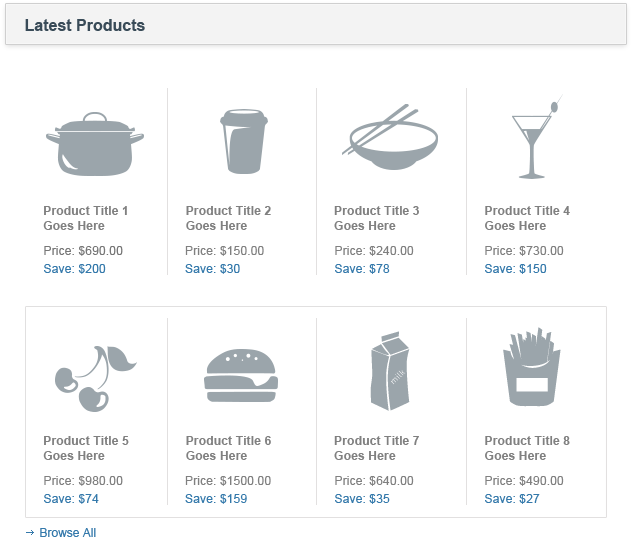
<style>
.page{position:relative;width:632px;height:537px;background:#ffffff}
.page>*{position:absolute;margin:0}
.t1{font:16px "Arial-BoldMT";color:#394b58}
.t2{font:12px "Arial-BoldMT";color:#808080}
.t3{font:12px/18px "ArialMT";color:#777777}
.t4{font:12px/18px "ArialMT";color:#3479ab}
.t5{font:12px/18px "ArialMT";color:#808080}
.t6{font:12px "ArialMT";color:#3479ab}
</style>
<div class="page">
<p class="t1" style="left:25px;top:19px;width:120px;height:12px">Latest Products</p>
<p class="t2" style="left:43px;top:206px;width:84px;height:24px">Product Title 1<br>Goes Here</p>
<p class="t2" style="left:186px;top:206px;width:85px;height:24px">Product Title 2<br>Goes Here</p>
<p class="t2" style="left:334px;top:206px;width:85px;height:24px">Product Title 3<br>Goes Here</p>
<p class="t2" style="left:485px;top:206px;width:85px;height:24px">Product Title 4<br>Goes Here</p>
<p class="t3" style="left:44px;top:246px;width:79px;height:28px">Price: $690.00<br><span class="t4">Save: $200</span></p>
<p class="t5" style="left:185px;top:246px;width:79px;height:28px">Price: $150.00<br><span class="t4">Save: $30</span></p>
<p class="t5" style="left:335px;top:246px;width:79px;height:28px">Price: $240.00<br><span class="t4">Save: $78</span></p>
<p class="t5" style="left:485px;top:246px;width:79px;height:28px">Price: $730.00<br><span class="t4">Save: $150</span></p>
<p class="t2" style="left:43px;top:436px;width:86px;height:24px">Product Title 5<br>Goes Here</p>
<p class="t2" style="left:186px;top:436px;width:85px;height:24px">Product Title 6<br>Goes Here</p>
<p class="t2" style="left:334px;top:436px;width:85px;height:24px">Product Title 7<br>Goes Here</p>
<p class="t2" style="left:485px;top:436px;width:85px;height:24px">Product Title 8<br>Goes Here</p>
<p class="t5" style="left:44px;top:476px;width:79px;height:28px">Price: $980.00<br><span class="t4">Save: $74</span></p>
<p class="t5" style="left:185px;top:476px;width:86px;height:28px">Price: $1500.00<br><span class="t4">Save: $159</span></p>
<p class="t5" style="left:335px;top:476px;width:79px;height:28px">Price: $640.00<br><span class="t4">Save: $35</span></p>
<p class="t5" style="left:485px;top:476px;width:79px;height:28px">Price: $490.00<br><span class="t4">Save: $27</span></p>
<p class="t6" style="left:40px;top:528px;width:56px;height:9px">Browse All</p>
</div>
